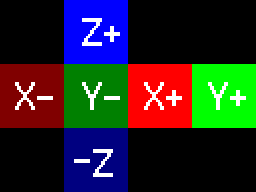
<style>
.page{position:relative;width:256px;height:192px;background:#000000}
.page>*{position:absolute;margin:0}
.t1{font:32px "Terminal";letter-spacing:-0.1em;color:#ffffff}
</style>
<div class="page">
<p class="t1" style="left:82px;top:18px;width:38px;height:28px">Z+</p>
<p class="t1" style="left:15px;top:82px;width:38px;height:28px">X-</p>
<p class="t1" style="left:82px;top:82px;width:38px;height:28px">Y-</p>
<p class="t1" style="left:144px;top:82px;width:38px;height:28px">X+</p>
<p class="t1" style="left:208px;top:82px;width:38px;height:28px">Y+</p>
<p class="t1" style="left:74px;top:149px;width:39px;height:28px;rotate:180deg">Z-</p>
</div>
